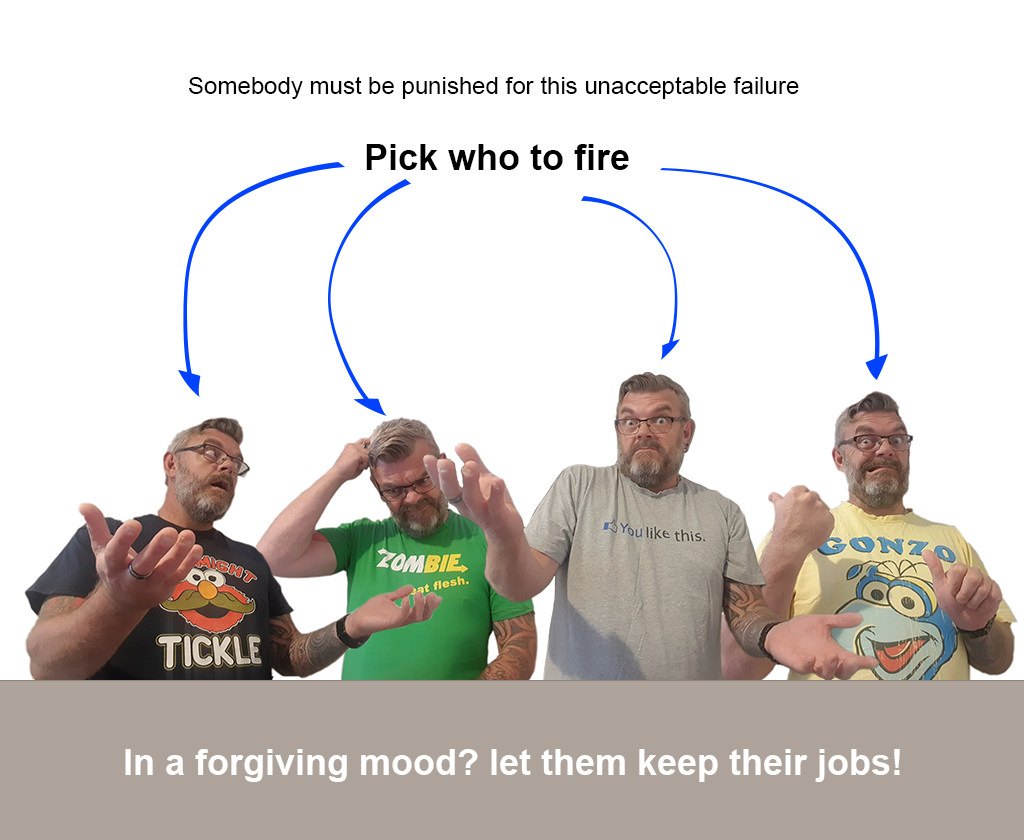
<style>
.page{position:relative;width:1024px;height:840px;background:#ffffff}
.page>*{position:absolute;margin:0}
.t1{font:24px "ArialMT";color:#000000}
.t2{font:36px "Arial-BoldMT";color:#000000}
.t3{font:36px "Arial-BoldMT";color:#ffffff}
</style>
<div class="page">
<p class="t1" style="left:189px;top:76px;width:610px;height:23px">Somebody must be punished for this unacceptable failure</p>
<p class="t2" style="left:366px;top:144px;width:263px;height:26px">Pick who to fire</p>
<p class="t3" style="left:125px;top:749px;width:775px;height:33px">In a forgiving mood? let them keep their jobs!</p>
</div>
